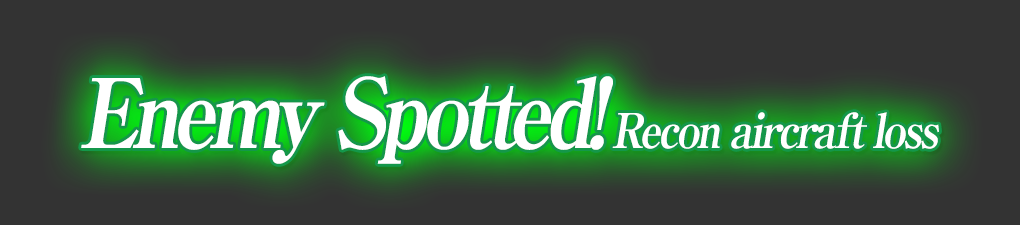
<style>
.page{position:relative;width:1020px;height:225px;background:#333333}
.page>*{position:absolute;margin:0}
.t1{font:48px "RyuminPro-ExBold";letter-spacing:-0.08em;color:#ffffff;font-style:italic;scale:0.9 1}
.t2{font:96px "RyuminPro-ExBold";letter-spacing:-0.08em;color:#ffffff;font-style:italic;scale:0.9 1}
</style>
<div class="page">
<p class="t1" style="left:81px;top:76px;width:858px;height:88px"><span class="t2">Enemy Spotted!</span> Recon aircraft loss</p>
</div>
